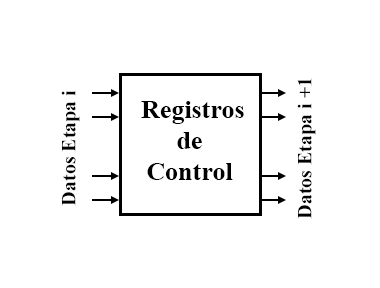
<style>
.page{position:relative;width:380px;height:288px;background:#ffffff}
.page>*{position:absolute;margin:0}
.t1{font:20px "TimesNewRomanPS-BoldMT";color:#000000}
.t2{font:26px "TimesNewRomanPS-BoldMT";color:#000000}
</style>
<div class="page">
<p class="t1" style="left:297px;top:78px;width:19px;height:141px;rotate:-90deg">Datos Etapa i +1</p>
<p class="t1" style="left:61px;top:90px;width:19px;height:116px;rotate:-90deg">Datos Etapa i</p>
<p class="t2" style="left:141px;top:101px;width:103px;height:79px;text-align:center">Registros <br>de<br>Control</p>
</div>
